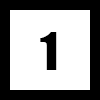
<style>
.page{position:relative;width:100px;height:100px;background:#ffffff}
.page>*{position:absolute;margin:0}
.t1{font:48px "Impact";color:#000000}
</style>
<div class="page">
<p class="t1" style="left:40px;top:32px;width:17px;height:38px">1</p>
</div>
